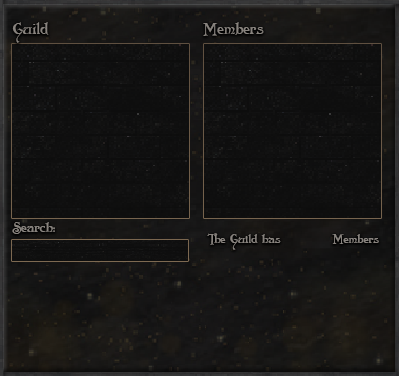
<style>
.page{position:relative;width:399px;height:376px}
.page>*{position:absolute;margin:0}
.t1{font:16px "Folkard";color:#88837e}
.t2{font:13.9px "Folkard";color:#88837e}
.t3{font:12.2px "Folkard";color:#88837e}
</style>
<div class="page">
<p class="t1" style="left:12px;top:22px;width:37px;height:21px">Guild</p>
<p class="t1" style="left:203px;top:22px;width:61px;height:14px">Members</p>
<p class="t2" style="left:12px;top:222px;width:43px;height:12px">Search:</p>
<p class="t3" style="left:207px;top:233px;width:74px;height:17px">The Guild has</p>
<p class="t3" style="left:332px;top:234px;width:47px;height:10px">Members</p>
</div>
